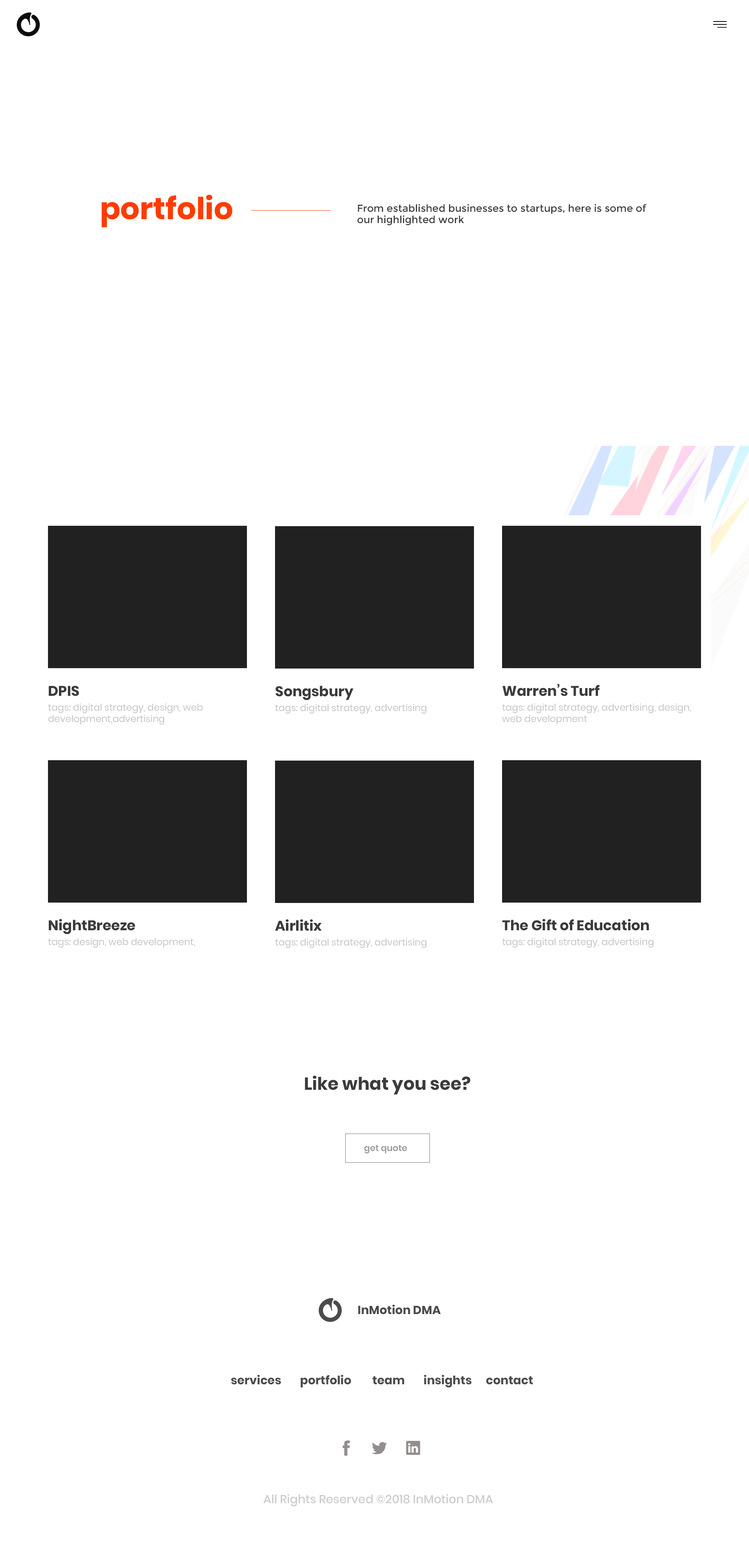
<style>
.page{position:relative;width:749px;height:1568px;background:#ffffff}
.page>*{position:absolute;margin:0}
.t1{font:30.4px "Poppins-Bold";color:#ff3c00}
.t2{font:10.1px/11.3px "Montserrat-Regular";color:#3c3c3c}
.t3{font:14px "Poppins-Bold";color:#3b3b3b}
.t4{font:9.4px "Poppins-Regular";color:#c4c4c4}
.t5{font:17.6px "Poppins-Bold";color:#3b3b3b}
.t6{font:8.8px "Poppins-SemiBold";color:#9b9b9b}
.t7{font:11.7px "Poppins-Bold";color:#4b4b4b}
.t8{font:11.7px "Poppins-Medium";color:#cecccc}
</style>
<div class="page">
<p class="t1" style="left:101px;top:195px;width:131px;height:32px">portfolio</p>
<p class="t2" style="left:357px;top:204px;width:290px;height:21px">From established businesses to startups, here is some of our highlighted work</p>
<p class="t3" style="left:49px;top:686px;width:30px;height:10px">DPIS</p>
<p class="t3" style="left:275px;top:686px;width:78px;height:14px">Songsbury</p>
<p class="t3" style="left:502px;top:684px;width:98px;height:12px">Warren’s Turf</p>
<p class="t4" style="left:48px;top:703px;width:155px;height:22px">tags: digital strategy, design, web development,advertising</p>
<p class="t4" style="left:275px;top:704px;width:151px;height:10px">tags: digital strategy, advertising</p>
<p class="t4" style="left:502px;top:703px;width:189px;height:22px">tags: digital strategy, advertising, design, web development</p>
<p class="t3" style="left:49px;top:919px;width:86px;height:15px">NightBreeze</p>
<p class="t3" style="left:275px;top:919px;width:47px;height:12px">Airlitix</p>
<p class="t3" style="left:502px;top:919px;width:147px;height:12px">The Gift of Education</p>
<p class="t4" style="left:48px;top:938px;width:147px;height:10px">tags: design, web development,</p>
<p class="t4" style="left:275px;top:938px;width:151px;height:10px">tags: digital strategy, advertising</p>
<p class="t4" style="left:502px;top:938px;width:151px;height:10px">tags: digital strategy, advertising</p>
<p class="t5" style="left:305px;top:1075px;width:165px;height:19px">Like what you see?</p>
<p class="t6" style="left:364px;top:1145px;width:43px;height:9px">get quote</p>
<p class="t7" style="left:358px;top:1304px;width:83px;height:10px">InMotion DMA</p>
<p class="t7" style="left:231px;top:1375px;width:302px;height:13px">services        portfolio         team        insights      contact</p>
<p class="t8" style="left:263px;top:1494px;width:230px;height:12px">All Rights Reserved ©2018 InMotion DMA</p>
</div>
